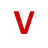
<style>
.page{position:relative;width:48px;height:48px;background:#ffffff}
.page>*{position:absolute;margin:0}
.t1{font:36px "Calibri-Bold";color:#cd0808}
.t2{font:14px "Calibri-Bold";color:#ffffff}
</style>
<div class="page">
<p class="t1" style="left:13px;top:11px;width:22px;height:23px"><span class="t2">     </span>V</p>
</div>
